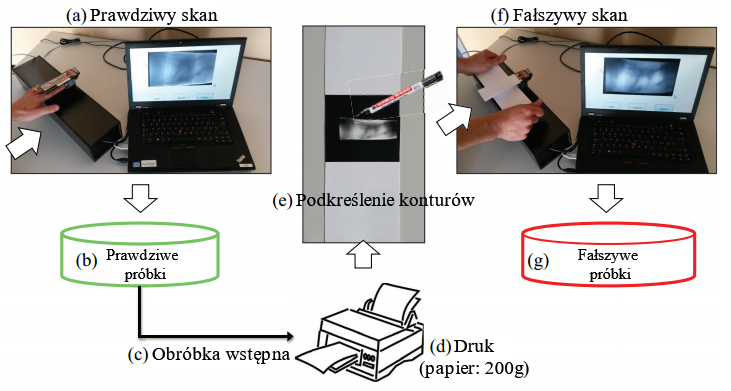
<style>
.page{position:relative;width:731px;height:391px;background:#ffffff}
.page>*{position:absolute;margin:0}
.t1{font:18.7px "TimesNewRomanPSMT";color:#000000}
.t2{font:16px "TimesNewRomanPSMT";color:#000000}
.t3{font:12px "TimesNewRomanPSMT";color:#000000}
</style>
<div class="page">
<p class="t1" style="left:90px;top:8px;width:128px;height:17px">Prawdziwy skan</p>
<p class="t1" style="left:513px;top:8px;width:115px;height:17px">Fałszywy skan</p>
<p class="t1" style="left:296px;top:193px;width:179px;height:13px">Podkreślenie konturów</p>
<p class="t2" style="left:106px;top:249px;width:72px;height:33px;text-align:center">Prawdziwe <br>próbki</p>
<p class="t3" style="left:578px;top:249px;width:60px;height:33px;text-align:center">Fałszywe <br>próbki</p>
<p class="t1" style="left:419px;top:339px;width:110px;height:39px;text-align:center">Druk<br>(papier: 200g)</p>
<p class="t1" style="left:152px;top:347px;width:138px;height:17px">Obróbka wstępna</p>
</div>
